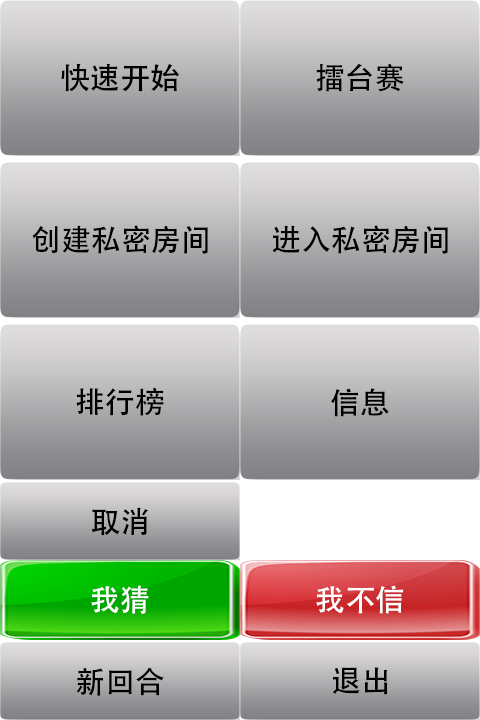
<style>
.page{position:relative;width:480px;height:720px}
.page>*{position:absolute;margin:0}
.t1{font:30px "AdobeHeitiStd-Regular";color:#000000}
.t2{font:30px "AdobeHeitiStd-Regular";color:#ffffff}
</style>
<div class="page">
<p class="t1" style="left:61px;top:63px;width:118px;height:29px">快速开始</p>
<p class="t1" style="left:316px;top:63px;width:88px;height:29px">擂台赛</p>
<p class="t1" style="left:32px;top:225px;width:176px;height:29px">创建私密房间</p>
<p class="t1" style="left:272px;top:225px;width:176px;height:29px">进入私密房间</p>
<p class="t1" style="left:76px;top:387px;width:88px;height:29px">排行榜</p>
<p class="t1" style="left:331px;top:388px;width:58px;height:29px">信息</p>
<p class="t1" style="left:91px;top:507px;width:57px;height:29px">取消</p>
<p class="t2" style="left:91px;top:585px;width:58px;height:29px">我猜</p>
<p class="t2" style="left:316px;top:585px;width:88px;height:29px">我不信</p>
<p class="t1" style="left:76px;top:667px;width:88px;height:29px">新回合</p>
<p class="t1" style="left:333px;top:667px;width:55px;height:28px">退出</p>
</div>
